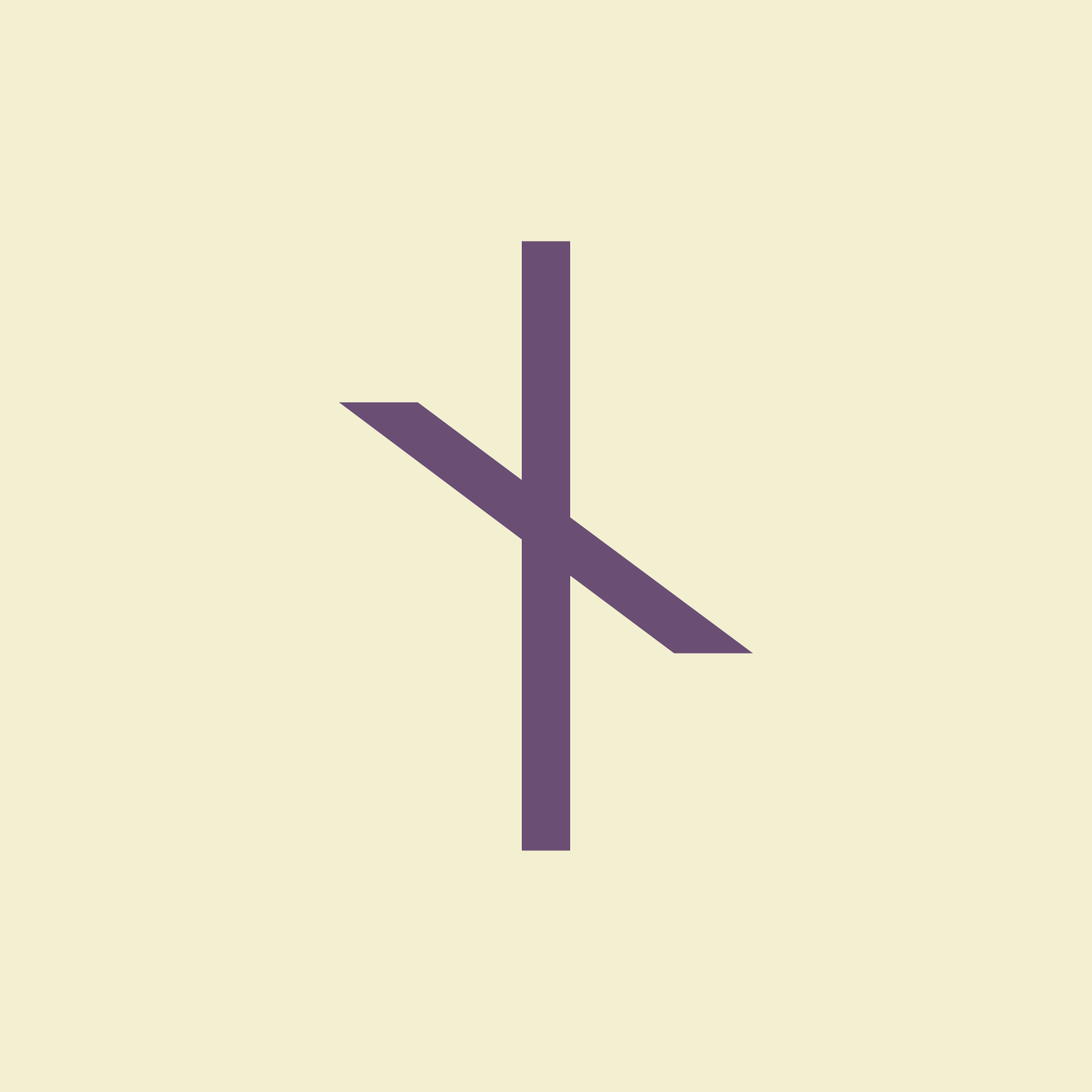
<style>
.page{position:relative;width:1092px;height:1092px;background:#f3f0d2}
.page>*{position:absolute;margin:0}
.t1{font:780px "Geneva";letter-spacing:-0.025em;color:#6a4e74}
</style>
<div class="page">
<p class="t1" style="left:339px;top:241px;width:414px;height:610px">ᚾ</p>
</div>
